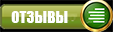
<style>
.page{position:relative;width:113px;height:32px}
.page>*{position:absolute;margin:0}
.t1{font:15.2px "Impact";color:#ffffff}
</style>
<div class="page">
<p class="t1" style="left:11px;top:11px;width:57px;height:12px">ОТЗЫВЫ</p>
</div>
